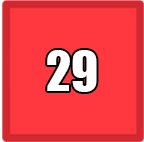
<style>
.page{position:relative;width:144px;height:142px;background:#ff3840}
.page>*{position:absolute;margin:0}
.t1{font:50px "Impact";color:#ffffff}
</style>
<div class="page">
<p class="t1" style="left:47px;top:50px;width:50px;height:42px">29</p>
</div>
